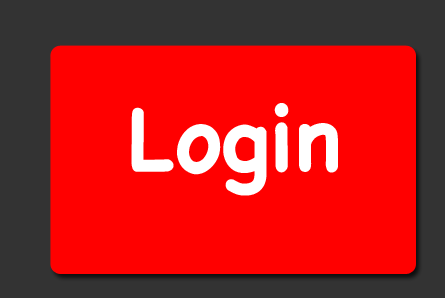
<style>
.page{position:relative;width:445px;height:298px;background:#ff0000}
.page>*{position:absolute;margin:0}
.t1{font:89.5px "ChalkboardSE-Bold";color:#ffffff}
</style>
<div class="page">
<p class="t1" style="left:131px;top:103px;width:207px;height:93px">Login</p>
</div>
